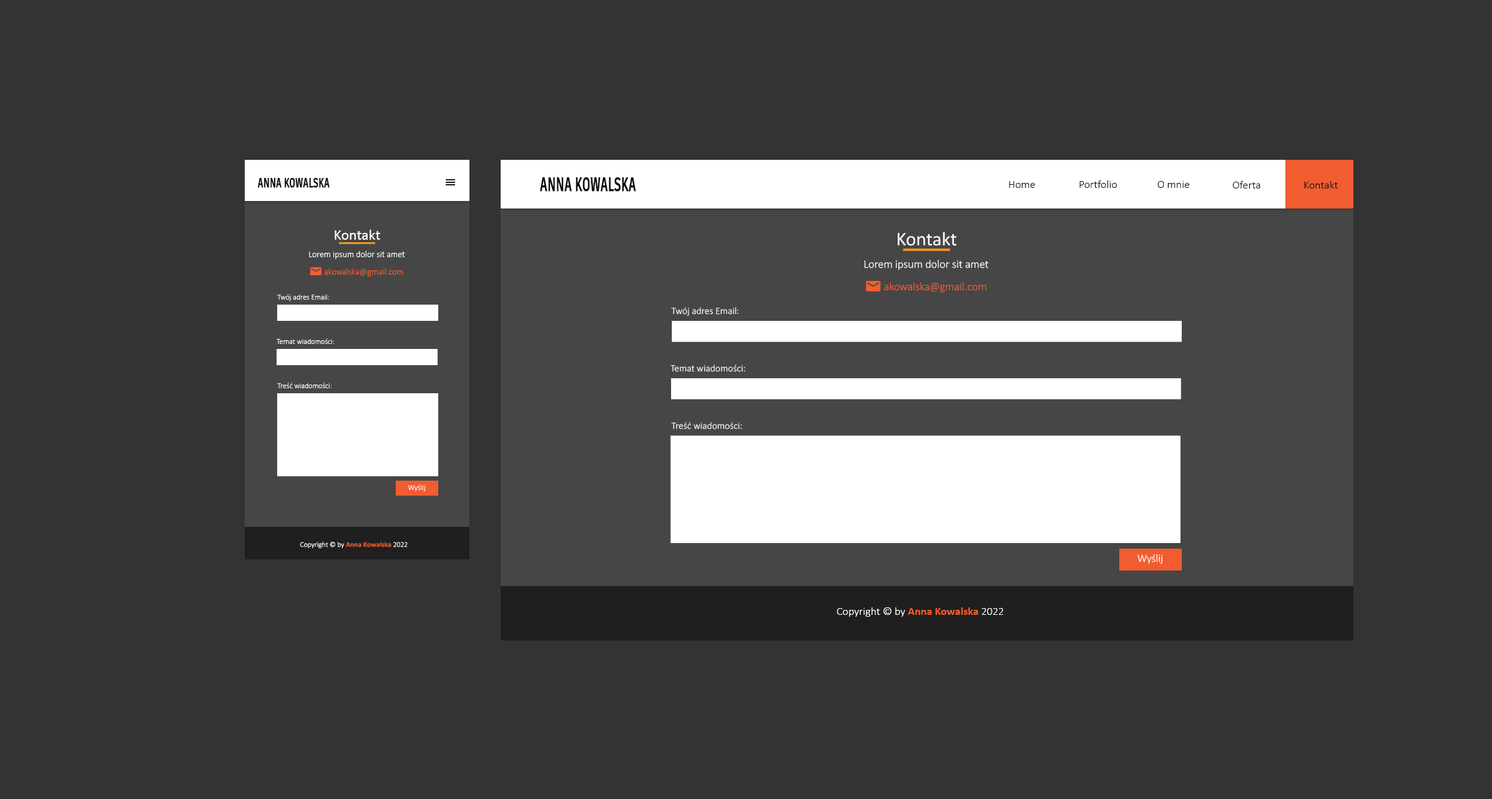
<style>
.page{position:relative;width:1492px;height:799px;background:#333333}
.page>*{position:absolute;margin:0}
.t1{font:14px "ArtifaktElement-Bold";letter-spacing:-0.01em;color:#111111;font-weight:bold;scale:0.6 1}
.t2{font:18.7px "ArtifaktElement-Bold";letter-spacing:-0.01em;color:#111111;font-weight:bold;scale:0.6 1}
.t3{font:11.2px "Calibri-Light";color:#111111}
.t4{font:15px "Calibri";color:#ffffff}
.t5{font:19.4px "Calibri";color:#ffffff}
.t6{font:8.7px "Calibri-Light";color:#ffffff}
.t7{font:8.7px "Calibri-Light";color:#f15d30}
.t8{font:11.3px "Calibri-Light";color:#ffffff}
.t9{font:11.3px "Calibri-Light";color:#f15d30}
.t10{font:7.5px "Calibri-Light";color:#ffffff}
.t11{font:9.7px "Calibri-Light";color:#ffffff}
.t12{font:7.2px "Calibri-Light";color:#ffffff}
.t13{font:7.2px "Calibri-Bold";color:#f15d30}
.t14{font:10.9px "Calibri-Light";color:#ffffff}
.t15{font:11.2px "Calibri-Light";color:#ffffff}
.t16{font:11.2px "Calibri-Bold";color:#f15d30}
</style>
<div class="page">
<p class="t1" style="left:258px;top:178px;width:72px;height:10px">ANNA KOWALSKA</p>
<p class="t2" style="left:540px;top:177px;width:96px;height:15px">ANNA KOWALSKA</p>
<p class="t3" style="left:1009px;top:181px;width:26px;height:7px">Home</p>
<p class="t3" style="left:1079px;top:180px;width:39px;height:8px">Portfolio</p>
<p class="t3" style="left:1158px;top:181px;width:32px;height:7px">O mnie</p>
<p class="t3" style="left:1232px;top:181px;width:29px;height:8px">Oferta</p>
<p class="t3" style="left:1304px;top:181px;width:34px;height:8px">Kontakt</p>
<p class="t4" style="left:335px;top:230px;width:45px;height:10px">Kontakt</p>
<p class="t5" style="left:898px;top:232px;width:58px;height:14px">Kontakt</p>
<p class="t6" style="left:309px;top:251px;width:96px;height:8px">Lorem ipsum dolor sit amet</p>
<p class="t7" style="left:324px;top:268px;width:79px;height:9px">akowalska@gmail.com</p>
<p class="t8" style="left:864px;top:260px;width:125px;height:10px">Lorem ipsum dolor sit amet</p>
<p class="t9" style="left:884px;top:282px;width:102px;height:11px">akowalska@gmail.com</p>
<p class="t10" style="left:277px;top:294px;width:52px;height:7px">Twój adres Email:</p>
<p class="t11" style="left:671px;top:307px;width:68px;height:9px">Twój adres Email:</p>
<p class="t10" style="left:277px;top:338px;width:57px;height:6px">Temat wiadomości:</p>
<p class="t11" style="left:671px;top:365px;width:74px;height:7px">Temat wiadomości:</p>
<p class="t10" style="left:277px;top:383px;width:55px;height:5px">Treść wiadomości:</p>
<p class="t11" style="left:671px;top:422px;width:71px;height:8px">Treść wiadomości:</p>
<p class="t10" style="left:408px;top:484px;width:17px;height:7px">Wyślij</p>
<p class="t12" style="left:300px;top:542px;width:108px;height:7px">Copyright © by <span class="t13">Anna Kowalska</span> 2022</p>
<p class="t14" style="left:1138px;top:554px;width:24px;height:10px">Wyślij</p>
<p class="t15" style="left:837px;top:607px;width:166px;height:10px">Copyright © by <span class="t16">Anna Kowalska</span> 2022</p>
</div>
